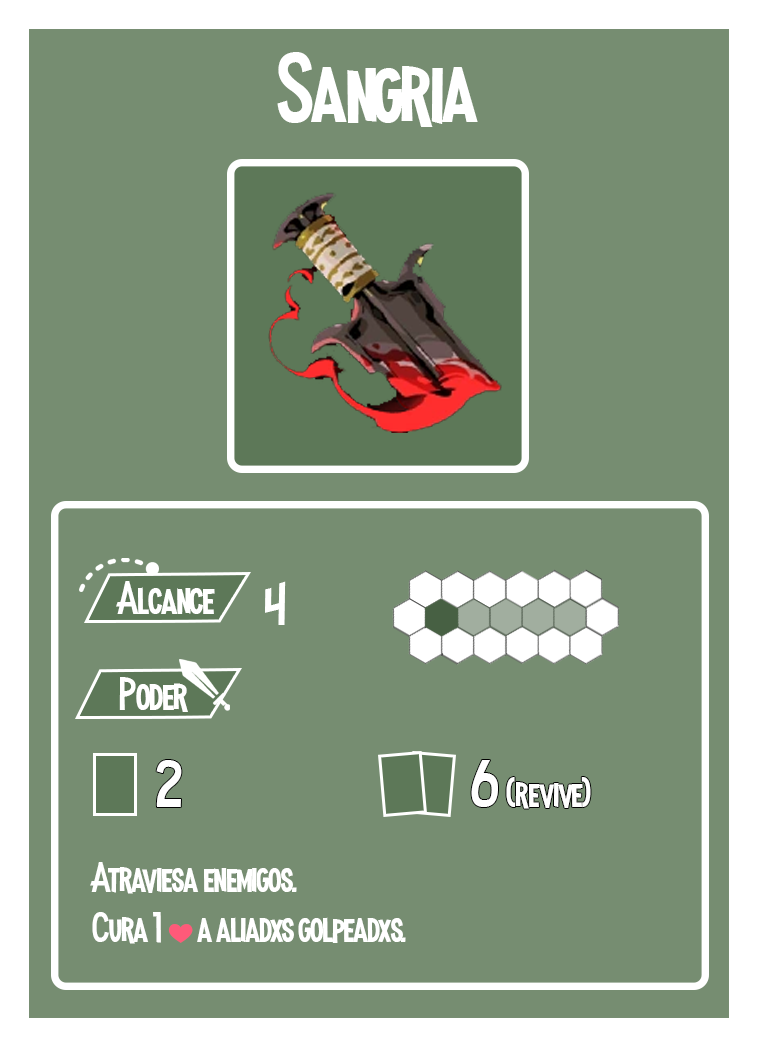
<style>
.page{position:relative;width:758px;height:1047px;background:#768d71}
.page>*{position:absolute;margin:0}
.t1{font:100px "MadnessHyperactive";color:#ffffff}
.t2{font:45.8px "MadnessHyperactive";color:#ffffff}
.t3{font:56.9px "MadnessHyperactive";color:#ffffff}
.t4{font:66.3px "MadnessHyperactive";color:#ffffff}
.t5{font:41.7px "MadnessHyperactive";color:#ffffff}
.t6{font:25px "EmojiOneColor";color:#ffffff}
</style>
<div class="page">
<p class="t1" style="left:277px;top:52px;width:201px;height:75px">Sangria</p>
<p class="t2" style="left:116px;top:581px;width:99px;height:33px">Alcance</p>
<p class="t3" style="left:265px;top:581px;width:21px;height:44px">4</p>
<p class="t2" style="left:119px;top:677px;width:69px;height:35px">Poder</p>
<p class="t4" style="left:156px;top:760px;width:26px;height:47px">2</p>
<p class="t5" style="left:471px;top:760px;width:120px;height:49px"><span class="t4">6 </span>(revive)</p>
<p class="t5" style="left:90px;top:862px;width:316px;height:82px">Atraviesa enemigos.<br>Cura 1 <span class="t6">❤️ </span>a aliadxs golpeadxs.</p>
</div>
